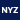
<style>
.page{position:relative;width:20px;height:20px;background:#081a52}
.page>*{position:absolute;margin:0}
.t1{font:8.3px "Lato-Bold";color:#ffffff}
</style>
<div class="page">
<p class="t1" style="left:2px;top:7px;width:17px;height:6px">NYZ</p>
</div>
